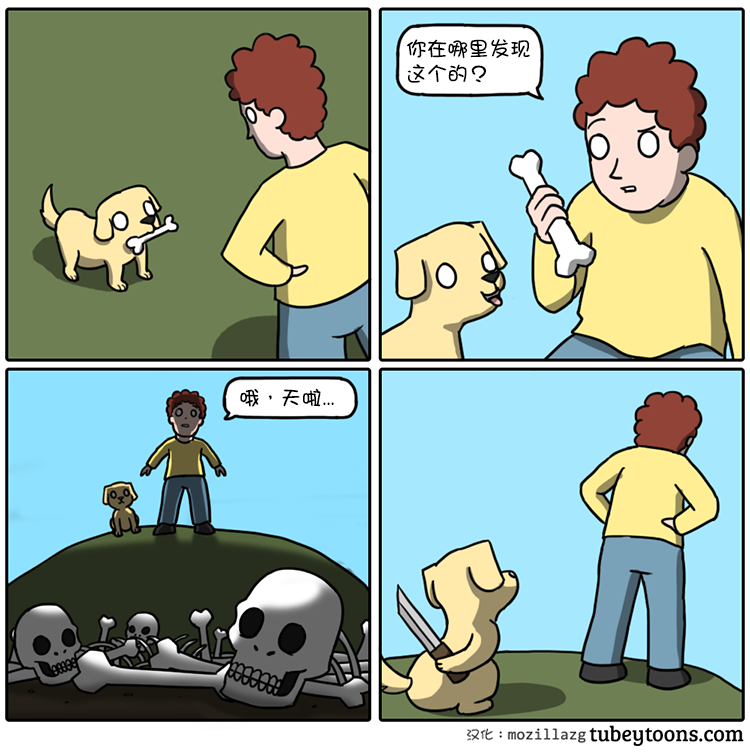
<style>
.page{position:relative;width:750px;height:754px}
.page>*{position:absolute;margin:0}
.t1{font:20.8px/25px "DFGirl";color:#000000}
.t2{font:20.8px "DFGirl";color:#000000}
</style>
<div class="page">
<p class="t1" style="left:407px;top:39px;width:123px;height:44px">你在哪里发现<br>这个的？</p>
<p class="t2" style="left:240px;top:388px;width:94px;height:19px">哦，天啦...</p>
</div>
